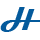
<style>
.page{position:relative;width:40px;height:40px;background:#ffffff}
.page>*{position:absolute;margin:0}
.t1{font:30px "Magneto-Bold";color:#045a9c}
</style>
<div class="page">
<p class="t1" style="left:0px;top:7px;width:42px;height:25px">H</p>
</div>
